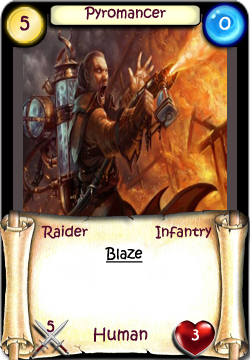
<style>
.page{position:relative;width:250px;height:360px}
.page>*{position:absolute;margin:0}
.t1{font:14px "KristenITC-Regular";color:#51092d}
.t2{font:20px "KristenITC-Regular";color:#51092d}
.t3{font:20px "KristenITC-Regular";color:#ffffff}
.t4{font:14px "KristenITC-Regular";color:#000000;text-decoration:underline}
.t5{font:16px "KristenITC-Regular";color:#51092d}
.t6{font:16px "KristenITC-Regular";color:#fefefe}
</style>
<div class="page">
<p class="t1" style="left:84px;top:6px;width:82px;height:14px">Pyromancer</p>
<p class="t2" style="left:20px;top:15px;width:10px;height:16px">5</p>
<p class="t3" style="left:219px;top:16px;width:12px;height:14px">0</p>
<p class="t1" style="left:41px;top:225px;width:47px;height:14px">Raider</p>
<p class="t1" style="left:155px;top:225px;width:57px;height:14px">Infantry</p>
<p class="t4" style="left:105px;top:247px;width:38px;height:16px">Blaze</p>
<p class="t5" style="left:46px;top:320px;width:9px;height:13px">5</p>
<p class="t5" style="left:93px;top:327px;width:55px;height:15px">Human</p>
<p class="t6" style="left:191px;top:329px;width:8px;height:12px">3</p>
</div>
